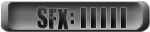
<style>
.page{position:relative;width:150px;height:32px}
.page>*{position:absolute;margin:0}
.t1{font:24px "YouAreLoved";color:#232323}
</style>
<div class="page">
<p class="t1" style="left:37px;top:7px;width:37px;height:23px">SFX:</p>
</div>
